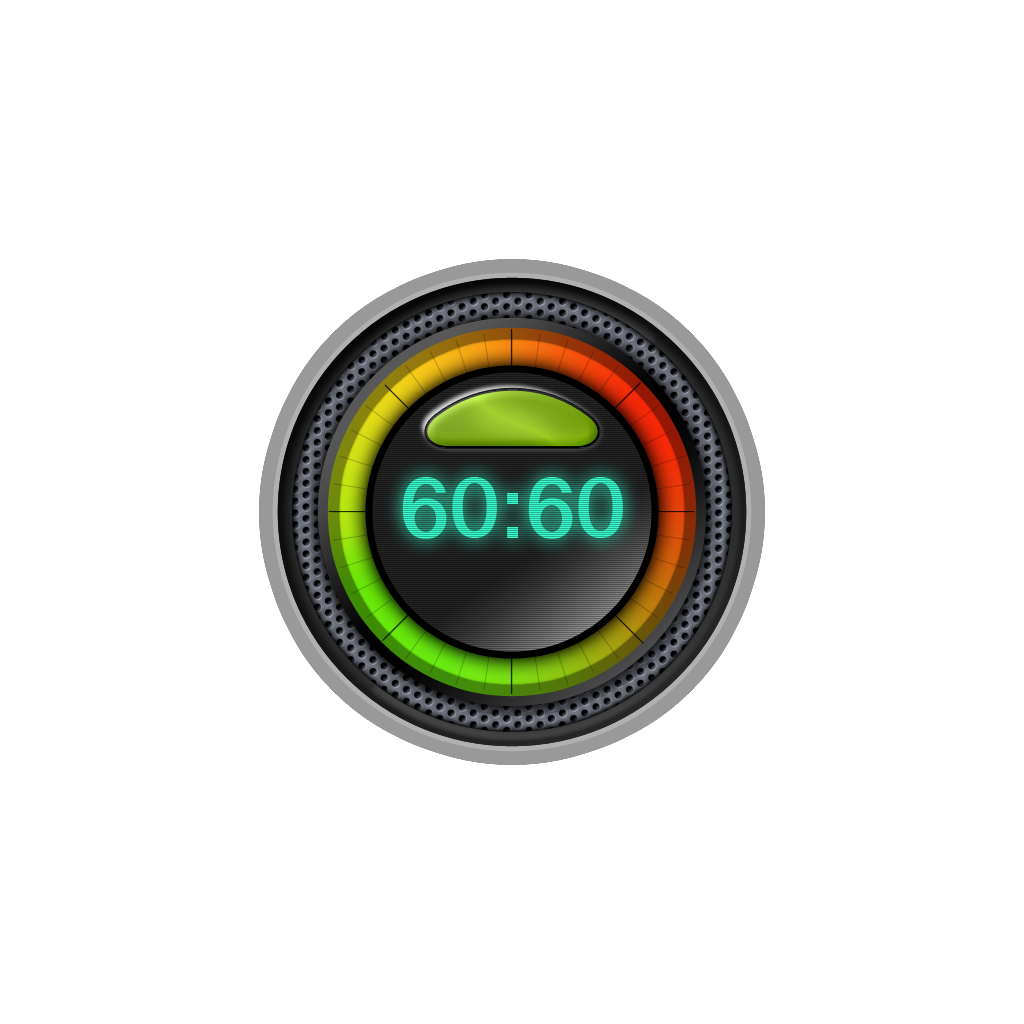
<style>
.page{position:relative;width:1024px;height:1024px;background:#ffffff}
.page>*{position:absolute;margin:0}
.t1{font:88.9px "DevanagariSangamMN-Bold"}
</style>
<div class="page">
<p class="t1" style="left:402px;top:477px;width:221px;height:62px">60:60</p>
</div>
